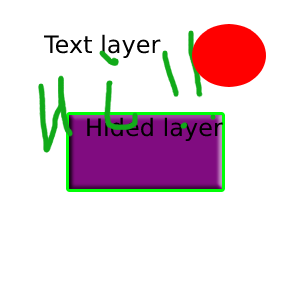
<style>
.page{position:relative;width:300px;height:300px;background:#ffffff}
.page>*{position:absolute;margin:0}
.t1{font:24px "DejaVuSans";color:#000000}
</style>
<div class="page">
<p class="t1" style="left:43px;top:34px;width:118px;height:24px">Text layer</p>
<p class="t1" style="left:87px;top:117px;width:136px;height:24px">Hided layer</p>
</div>
